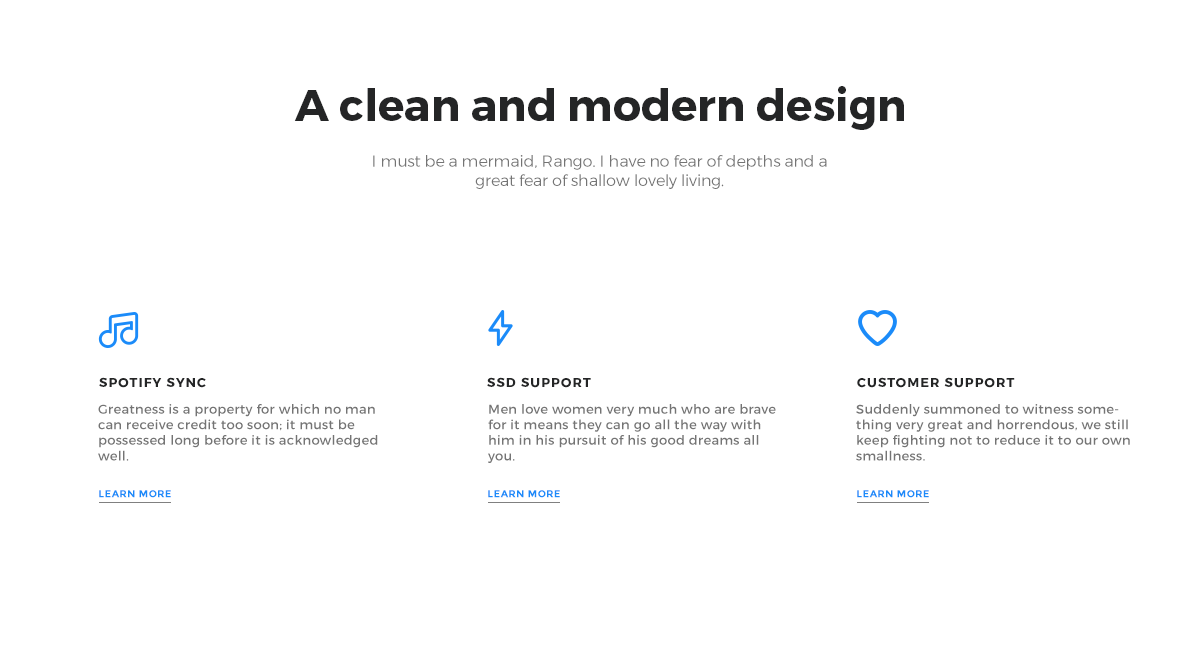
<style>
.page{position:relative;width:1200px;height:650px;background:#ffffff}
.page>*{position:absolute;margin:0}
.t1{font:44px "Montserrat-Bold";color:#242526}
.t2{font:16px "Montserrat-Light";color:#747474}
.t3{font:13px "Montserrat-Bold";letter-spacing:0.08em;color:#242526;text-transform:uppercase}
.t4{font:13px "Montserrat-Regular";letter-spacing:0.025em;color:#747474}
.t5{font:10px "Montserrat-Bold";letter-spacing:0.04em;color:#1b8bf9;text-transform:uppercase}
</style>
<div class="page">
<p class="t1" style="left:294px;top:86px;width:610px;height:44px">A clean and modern design</p>
<p class="t2" style="left:373px;top:155px;width:454px;height:34px;text-align:center">I must be a mermaid, Rango. I have no fear of depths and a great fear of shallow lovely living.</p>
<p class="t3" style="left:99px;top:377px;width:107px;height:11px">spotify sync</p>
<p class="t3" style="left:487px;top:377px;width:104px;height:11px">ssd support</p>
<p class="t3" style="left:857px;top:377px;width:158px;height:11px">customer support</p>
<p class="t4" style="left:98px;top:404px;width:280px;height:57px">Greatness is a property for which no man can receive credit too soon; it must be possessed long before it is acknowledged well.</p>
<p class="t4" style="left:488px;top:404px;width:288px;height:59px">Men love women very much who are brave for it means they can go all the way with him in his pursuit of his good dreams all you.</p>
<p class="t4" style="left:856px;top:404px;width:274px;height:57px">Suddenly summoned to witness something very great and horrendous, we still keep fighting not to reduce it to our own smallness.</p>
<p class="t5" style="left:99px;top:490px;width:72px;height:8px">Learn more</p>
<p class="t5" style="left:488px;top:490px;width:72px;height:8px">Learn more</p>
<p class="t5" style="left:857px;top:490px;width:72px;height:8px">Learn more</p>
</div>
